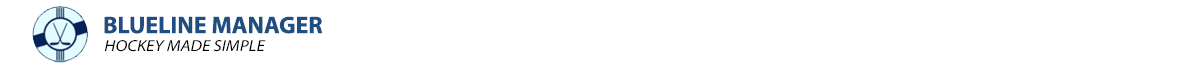
<style>
.page{position:relative;width:1200px;height:68px;background:#ffffff}
.page>*{position:absolute;margin:0}
.t1{font:24px "MyriadConceptRoman-Bold";color:#1f4f82}
.t2{font:16px "MyriadConceptItalic-Italic";color:#000000;scale:1.1 1}
</style>
<div class="page">
<p class="t1" style="left:104px;top:16px;width:219px;height:18px">BLUELINE MANAGER</p>
<p class="t2" style="left:104px;top:40px;width:162px;height:12px">HOCKEY MADE SIMPLE</p>
</div>
